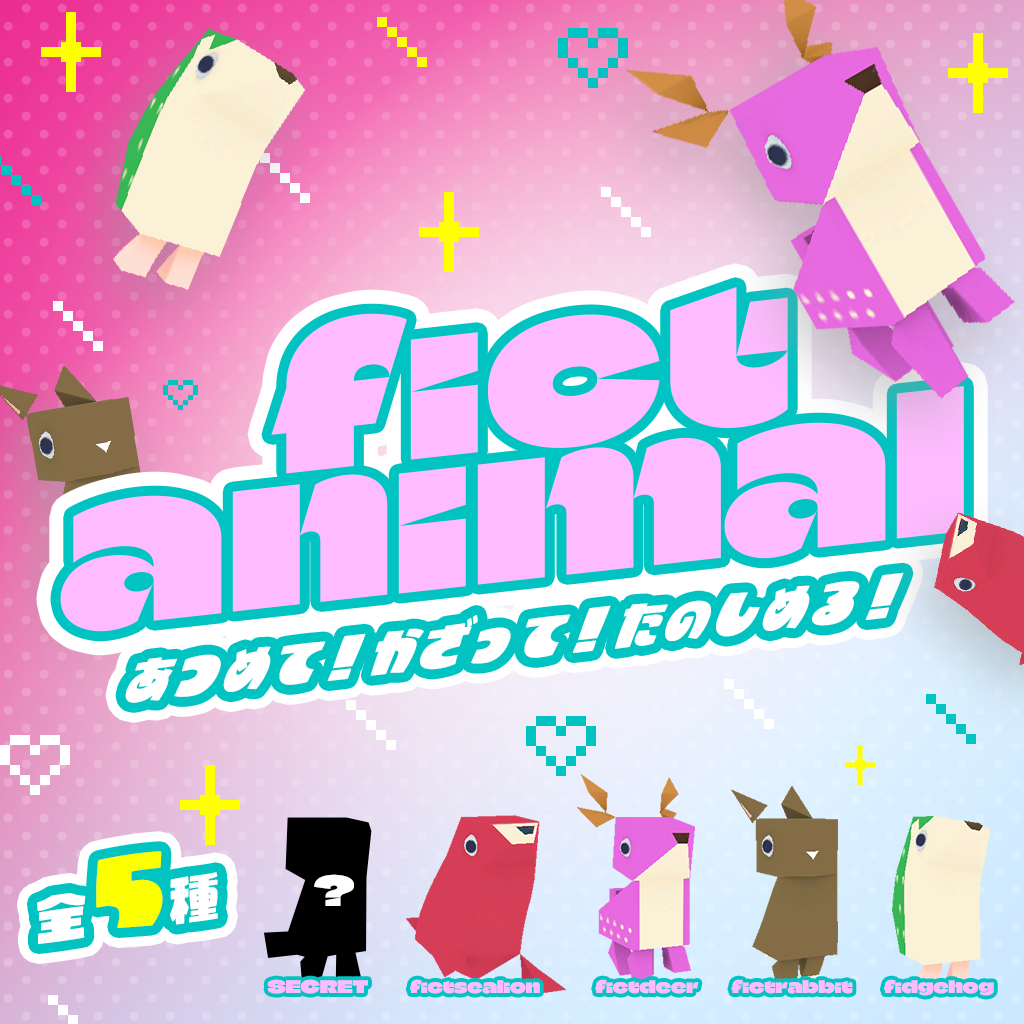
<style>
.page{position:relative;width:1024px;height:1024px}
.page>*{position:absolute;margin:0}
.t1{font:193.5px "ClimateCrisis-Regular";color:#ffbbff}
.t2{font:57.9px "AB-j_gu";letter-spacing:-0.04em;color:#ffffff;scale:0.89 1}
.t3{font:54px "AB-j_gu";color:#ffffff}
.t4{font:90px "AB-j_gu";color:#fcff00}
.t5{font:40px "ClimateCrisis-Regular";color:#ffffff}
.t6{font:17px "ClimateCrisis-Regular";color:#ffbbff}
</style>
<div class="page">
<p class="t1" style="left:271px;top:287px;width:517px;height:187px;rotate:-6deg">fict</p>
<p class="t1" style="left:60px;top:386px;width:904px;height:246px;rotate:-6deg">animal</p>
<p class="t2" style="left:125px;top:572px;width:779px;height:131px;rotate:-6deg">あつめて！かざって！たのしめる！</p>
<p class="t3" style="left:37px;top:851px;width:181px;height:93px;rotate:-8deg">全<span class="t4">5</span>種</p>
<p class="t5" style="left:314px;top:874px;width:40px;height:32px">?</p>
<p class="t6" style="left:267px;top:979px;width:101px;height:15px">SECRET</p>
<p class="t6" style="left:409px;top:979px;width:131px;height:15px">fictsealion</p>
<p class="t6" style="left:595px;top:979px;width:104px;height:15px">fictdeer</p>
<p class="t6" style="left:731px;top:979px;width:122px;height:15px">fictrabbit</p>
<p class="t6" style="left:883px;top:979px;width:111px;height:17px">fidgehog</p>
</div>
